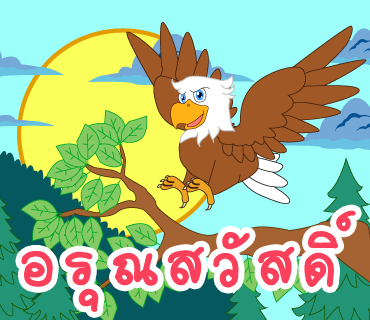
<style>
.page{position:relative;width:370px;height:320px;background:#9cfffa}
.page>*{position:absolute;margin:0}
.t1{font:93px "2005_iannnnnMTV";letter-spacing:0.075em;color:#fa405a;scale:1.06 1}
</style>
<div class="page">
<p class="t1" style="left:21px;top:210px;width:335px;height:102px">อรุณสวัสดิ์</p>
</div>
